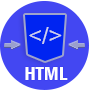
<style>
.page{position:relative;width:90px;height:90px;background:#4347f2}
.page>*{position:absolute;margin:0}
.t1{font:24px "ArialSpecialG1";color:#cdd0eb}
.t2{font:20px "FranklinGothic-DemiCond";color:#ffffff}
</style>
<div class="page">
<p class="t1" style="left:29px;top:27px;width:33px;height:17px">&lt;/&gt;</p>
<p class="t2" style="left:25px;top:67px;width:43px;height:13px">HTML</p>
</div>
